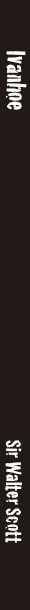
<style>
.page{position:relative;width:30px;height:610px;background:#221a17}
.page>*{position:absolute;margin:0}
.t1{font:28.4px "Cracked";color:#fdfefd;scale:0.94 1}
.t2{font:22.4px "Cracked";color:#fffdfd;scale:0.94 1}
</style>
<div class="page">
<p class="t1" style="left:5px;top:51px;width:22px;height:59px;rotate:90deg">Ivanhoe</p>
<p class="t2" style="left:5px;top:440px;width:17px;height:103px;rotate:90deg">Sir Walter Scott</p>
</div>
